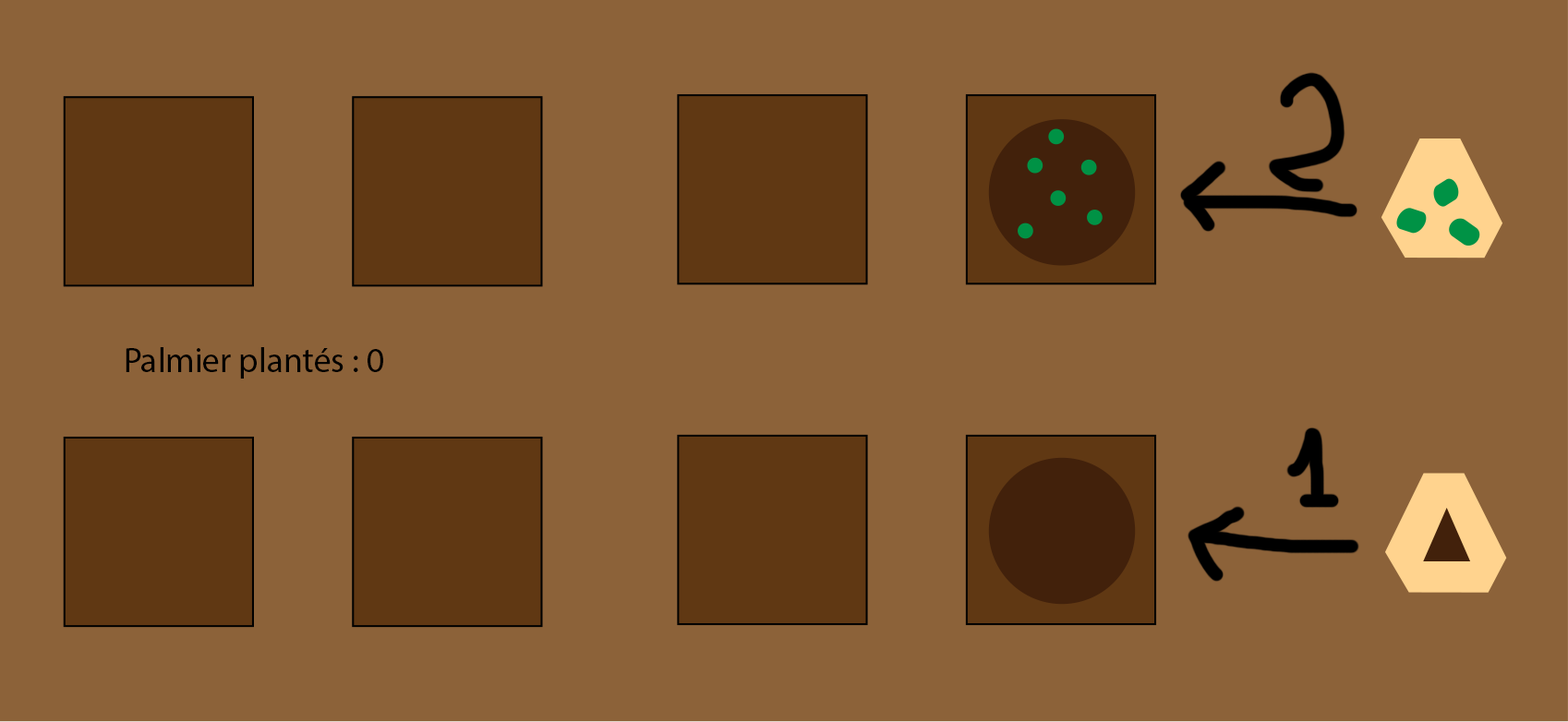
<style>
.page{position:relative;width:1568px;height:722px;background:#8c6239}
.page>*{position:absolute;margin:0}
.t1{font:34.6px "MyriadPro-Regular";color:#000000}
</style>
<div class="page">
<p class="t1" style="left:126px;top:347px;width:257px;height:32px">Palmier plantés : 0</p>
</div>
